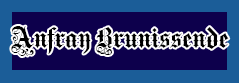
<style>
.page{position:relative;width:239px;height:83px;background:#0d004c}
.page>*{position:absolute;margin:0}
.t1{font:30px "MediciText";color:#000000}
</style>
<div class="page">
<p class="t1" style="left:11px;top:26px;width:218px;height:30px">Anfray Brunissende</p>
</div>
